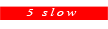
<style>
.page{position:relative;width:108px;height:29px;background:#ffffff}
.page>*{position:absolute;margin:0}
.t1{font:14px "Vijaya";letter-spacing:0.14em;color:#ffffff;scale:1.29 1}
</style>
<div class="page">
<p class="t1" style="left:26px;top:8px;width:51px;height:8px">5 slow</p>
</div>
